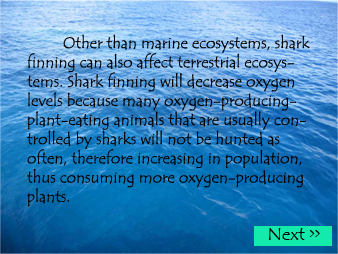
<style>
.page{position:relative;width:338px;height:254px}
.page>*{position:absolute;margin:0}
.t1{font:16px "TempusSansITC";color:#000000}
</style>
<div class="page">
<p class="t1" style="left:26px;top:34px;width:284px;height:173px">Other than marine ecosystems, shark finning can also affect terrestrial ecosystems. Shark finning will decrease oxygen levels because many oxygen-producing-plant-eating animals that are usually controlled by sharks will not be hunted as often, therefore increasing in population, thus consuming more oxygen-producing plants.</p>
</div>
